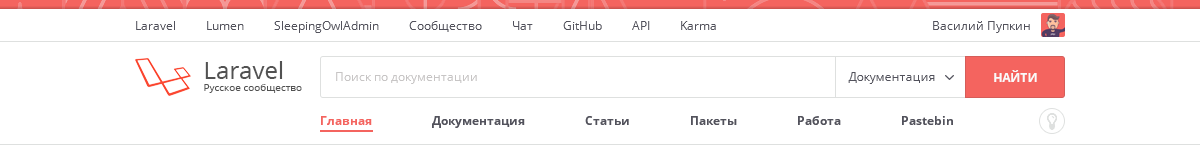
<style>
.page{position:relative;width:1200px;height:145px;background:#ffffff}
.page>*{position:absolute;margin:0}
.t1{font:12px "OpenSans";color:#52525c}
.t2{font:10px "OpenSans";color:#525252}
.t3{font:24px "OpenSans";color:#525252}
.t4{font:12px "OpenSans";color:#c7c5c5}
.t5{font:12px "OpenSans-Bold";color:#f9f9f9}
.t6{font:12px "OpenSans-Bold";color:#52525c}
.t7{font:12px "OpenSans-Bold";color:#f4645f}
</style>
<div class="page">
<p class="t1" style="left:136px;top:21px;width:580px;height:12px">Laravel          Lumen          SleepingOwlAdmin          Сообщество          Чат          GitHub          API          Karma</p>
<p class="t1" style="left:933px;top:21px;width:97px;height:12px">Василий Пупкин</p>
<p class="t2" style="left:204px;top:61px;width:98px;height:32px"><span class="t3">Laravel<br></span>Русское сообщество</p>
<p class="t4" style="left:336px;top:72px;width:141px;height:12px">Поиск по документации</p>
<p class="t1" style="left:848px;top:72px;width:87px;height:12px">Документация</p>
<p class="t5" style="left:994px;top:70px;width:43px;height:12px">НАЙТИ</p>
<p class="t6" style="left:321px;top:116px;width:632px;height:12px"><span class="t7">Главная</span>                    Документация                    Статьи                    Пакеты                    Работа                    Pastebin</p>
</div>
